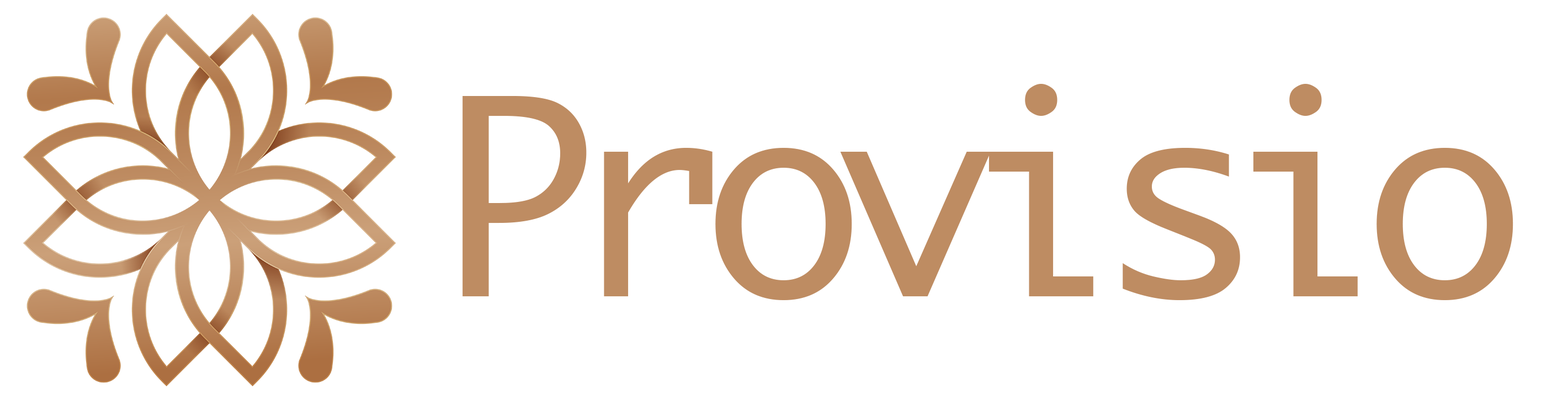
<style>
.page{position:relative;width:1568px;height:400px;background:#ffffff}
.page>*{position:absolute;margin:0}
.t1{font:264.5px "Monaco";letter-spacing:-0.1em;color:#be8c62}
</style>
<div class="page">
<p class="t1" style="left:463px;top:84px;width:1050px;height:216px">Provisio</p>
</div>
